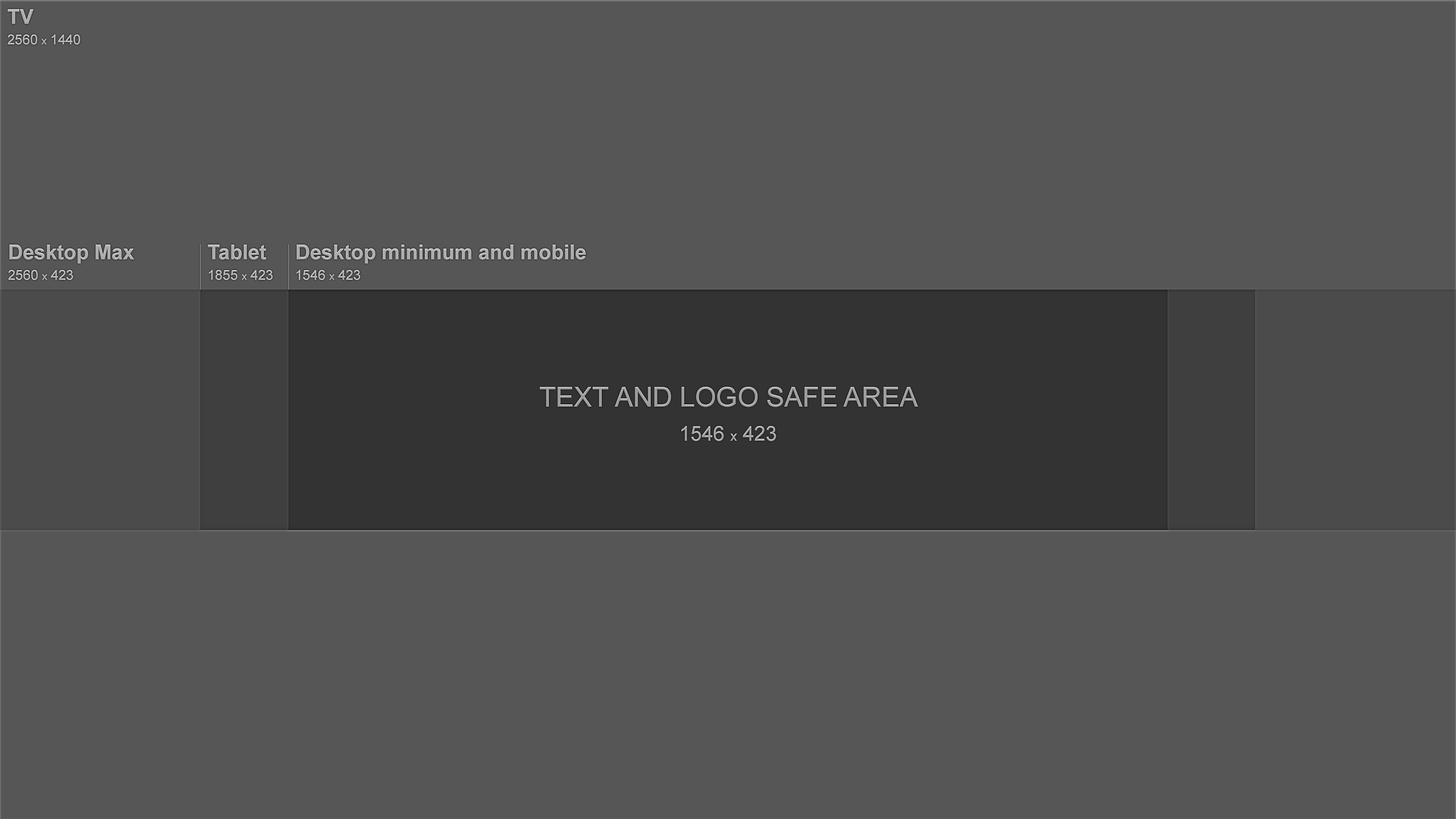
<style>
.page{position:relative;width:1456px;height:819px;background:#565656}
.page>*{position:absolute;margin:0}
.t1{font:13.6px/20.5px "ArialMT";color:#bababa}
.t2{font:20.5px/20.5px "Arial-BoldMT";color:#bababa}
.t3{font:10.2px/20.5px "ArialMT";color:#bababa}
.t4{font:20.5px/20.5px "Arial-BoldMT";color:#b1b1b1}
.t5{font:13.6px/20.5px "ArialMT";color:#b1b1b1}
.t6{font:10.2px/20.5px "ArialMT";color:#b1b1b1}
.t7{font:20.5px/20.5px "Arial-BoldMT";color:#b6b6b6}
.t8{font:13.6px/20.5px "ArialMT";color:#b6b6b6}
.t9{font:10.2px/20.5px "ArialMT";color:#b6b6b6}
.t10{font:20.5px "Arial-BoldMT";color:#b1b1b1}
.t11{font:27.3px/34.1px "ArialMT";color:#a1a1a1}
.t12{font:20.5px/34.1px "ArialMT";color:#a1a1a1}
.t13{font:13.6px/34.1px "ArialMT";color:#a1a1a1}
</style>
<div class="page">
<p class="t1" style="left:7px;top:9px;width:73px;height:36px"><span class="t2">TV<br></span>2560 <span class="t3">x</span> 1440</p>
<p class="t4" style="left:8px;top:245px;width:126px;height:35px">Desktop Max<br><span class="t5">2560 </span><span class="t6">x</span><span class="t5"> 423</span></p>
<p class="t7" style="left:208px;top:245px;width:65px;height:35px">Tablet<br><span class="t8">1855 </span><span class="t9">x</span><span class="t8"> 423</span></p>
<p class="t10" style="left:296px;top:245px;width:290px;height:35px">Desktop minimum and mobile<span class="t4"><br></span><span class="t5">1546 </span><span class="t6">x</span><span class="t5"> 423</span></p>
<p class="t11" style="left:540px;top:387px;width:378px;height:54px;text-align:center">TEXT AND LOGO SAFE AREA<br><span class="t12">1546 </span><span class="t13">x</span><span class="t12"> 423</span></p>
</div>
